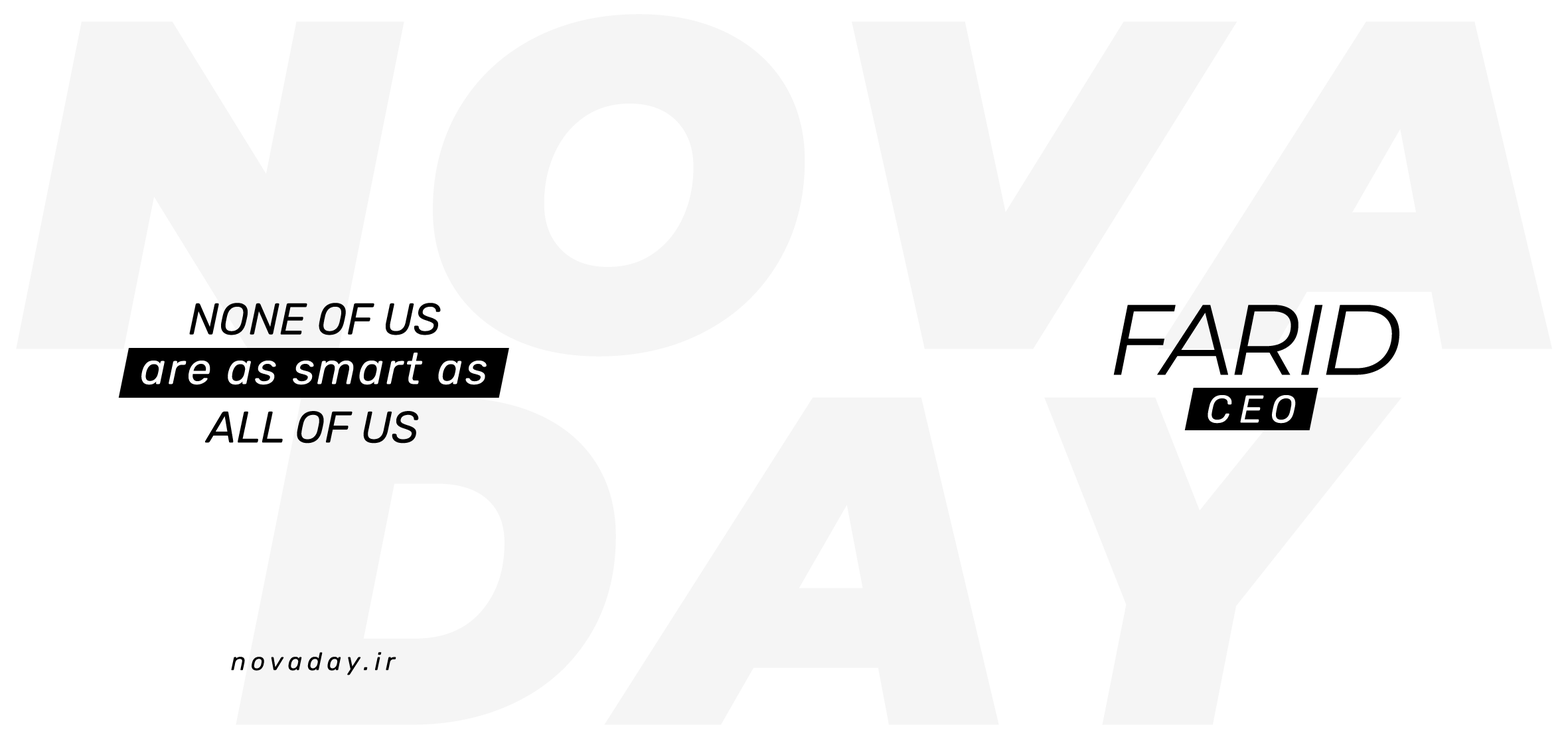
<style>
.page{position:relative;width:1568px;height:745px;background:#ffffff}
.page>*{position:absolute;margin:0}
.t1{font:44.3px "Rubik-Italic";color:#000000}
.t2{font:99.6px "Montserrat-Italic";letter-spacing:-0.05em;color:#000000}
.t3{font:44.3px "Rubik-Italic";letter-spacing:0.05em;color:#ffffff}
.t4{font:38.7px "Rubik-Italic";letter-spacing:0.2em;color:#ffffff}
.t5{font:24.9px "Rubik-Italic";letter-spacing:0.2em;color:#000000}
</style>
<div class="page">
<p class="t1" style="left:189px;top:303px;width:252px;height:32px">NONE OF US</p>
<p class="t2" style="left:1113px;top:305px;width:286px;height:70px">FARID</p>
<p class="t3" style="left:141px;top:353px;width:346px;height:32px">are as smart as</p>
<p class="t4" style="left:1208px;top:395px;width:88px;height:29px">CEO</p>
<p class="t1" style="left:205px;top:411px;width:214px;height:32px">ALL OF US</p>
<p class="t5" style="left:231px;top:652px;width:165px;height:23px">novaday.ir</p>
</div>
